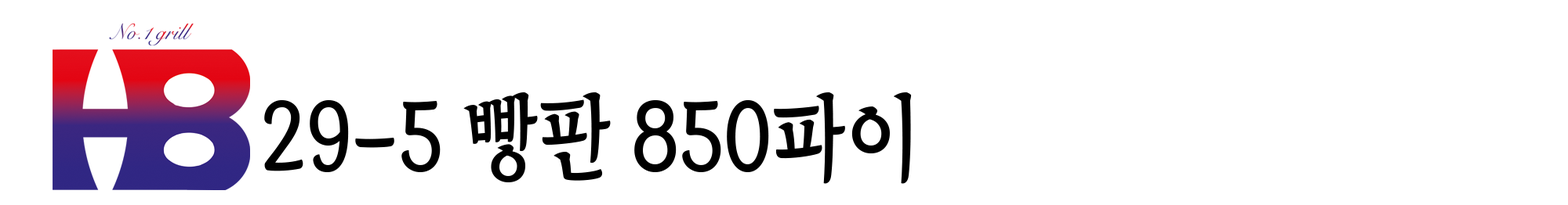
<style>
.page{position:relative;width:1568px;height:205px;background:#ffffff}
.page>*{position:absolute;margin:0}
.t1{font:93.7px "TheIndependenceHallofKorea-Regular";color:#000000;scale:0.89 1}
</style>
<div class="page">
<p class="t1" style="left:264px;top:93px;width:648px;height:91px">29-5 빵판 850파이</p>
</div>
